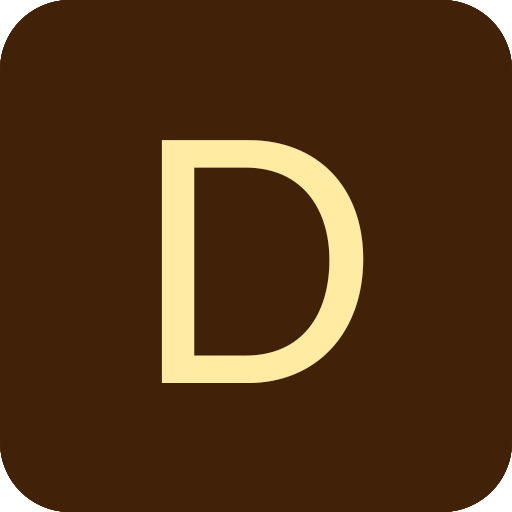
<style>
.page{position:relative;width:512px;height:512px;background:#412209}
.page>*{position:absolute;margin:0}
.t1{font:349px "AcuminConcept-Regular";color:#ffeba1}
</style>
<div class="page">
<p class="t1" style="left:161px;top:140px;width:203px;height:243px">D</p>
</div>
